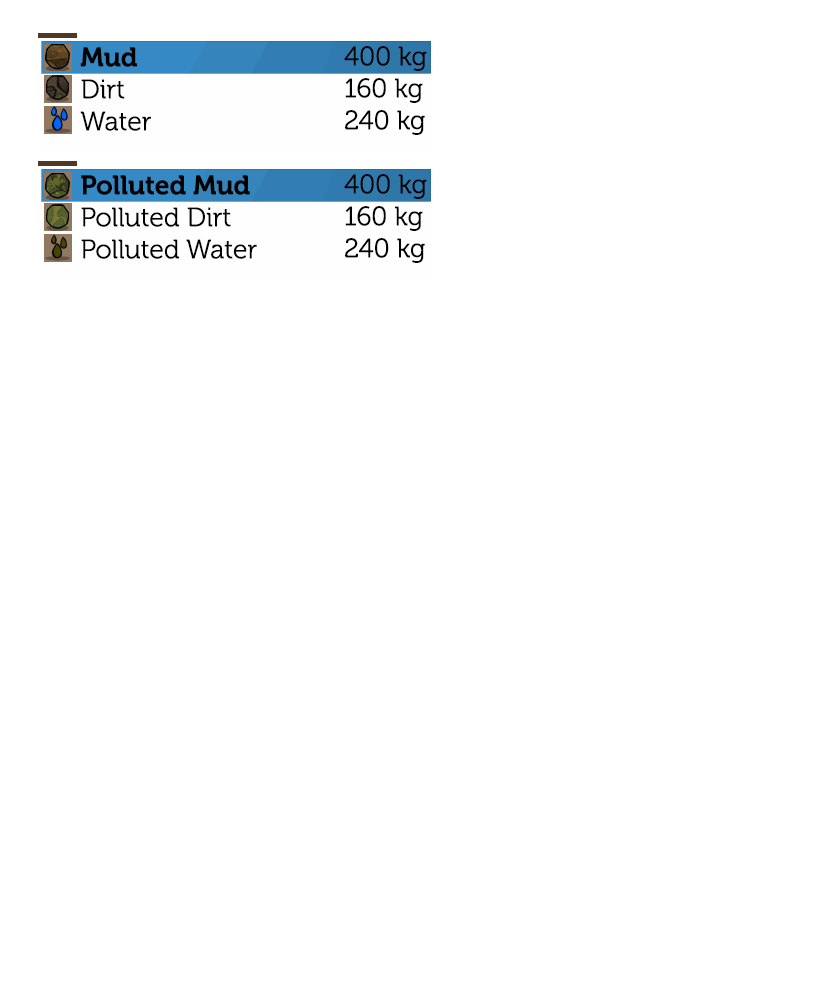
<style>
.page{position:relative;width:830px;height:998px;background:#ffffff}
.page>*{position:absolute;margin:0}
.t1{font:26.7px "Museo-300";color:#000000}
.t2{font:26.7px "Museo-700";color:#000000}
</style>
<div class="page">
<p class="t1" style="left:80px;top:47px;width:177px;height:212px"><span class="t2">Mud<br></span>Dirt<br>Water<br><br><span class="t2">Polluted Mud<br></span>Polluted Dirt<br>Polluted Water</p>
<p class="t1" style="left:344px;top:46px;width:83px;height:217px">400 kg<br>160 kg<br>240 kg<br><br>400 kg<br>160 kg<br>240 kg</p>
</div>
